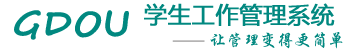
<style>
.page{position:relative;width:350px;height:50px;background:#ffffff}
.page>*{position:absolute;margin:0}
.t1{font:22.6px "MicrosoftYaHei";color:#018880;font-weight:bold}
.t2{font:34.3px "SegoeScript-Bold";color:#018880;font-weight:bold}
</style>
<div class="page">
<p class="t1" style="left:144px;top:3px;width:191px;height:23px">学生工作管理系统</p>
<p class="t2" style="left:14px;top:10px;width:115px;height:30px">GDOU</p>
</div>
